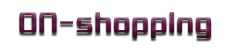
<style>
.page{position:relative;width:230px;height:50px;background:#ffffff}
.page>*{position:absolute;margin:0}
.t1{font:29.2px "TTHakgyoansimUndongjangL"}
</style>
<div class="page">
<p class="t1" style="left:19px;top:12px;width:192px;height:26px">ON-shopping</p>
</div>
